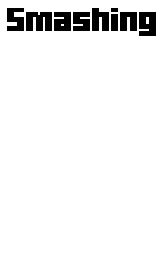
<style>
.page{position:relative;width:160px;height:265px;background:#ffffff}
.page>*{position:absolute;margin:0}
.t1{font:24px "MinercraftoryRegular";color:#000000}
</style>
<div class="page">
<p class="t1" style="left:7px;top:8px;width:149px;height:28px">Smashing</p>
</div>
